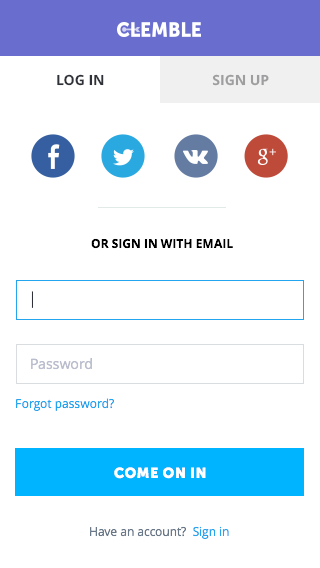
<style>
.page{position:relative;width:320px;height:568px;background:#ffffff}
.page>*{position:absolute;margin:0}
.t1{font:14px "OpenSans-Bold";color:#2f3139;text-transform:uppercase}
.t2{font:14px "OpenSans-Bold";color:#9e9ea0;text-transform:uppercase}
.t3{font:12px "OpenSans-Bold";color:#000000;text-transform:uppercase}
.t4{font:16px "OpenSans-Light";color:#2f3139}
.t5{font:14px "OpenSans";color:#b9bdcd}
.t6{font:12px "OpenSans";color:#24a6ef}
.t7{font:14px "MuseoSans-900";letter-spacing:0.05em;color:#ffffff;text-transform:uppercase}
.t8{font:12px "OpenSans";color:#697889}
</style>
<div class="page">
<p class="t1" style="left:57px;top:74px;width:47px;height:12px">Log in</p>
<p class="t2" style="left:212px;top:74px;width:57px;height:12px">Sign up</p>
<p class="t3" style="left:91px;top:238px;width:142px;height:11px">OR sign in with email</p>
<p class="t4" style="left:31px;top:291px;width:2px;height:17px">|</p>
<p class="t5" style="left:31px;top:358px;width:61px;height:12px">Password</p>
<p class="t6" style="left:16px;top:398px;width:98px;height:13px">Forgot password?</p>
<p class="t7" style="left:114px;top:467px;width:92px;height:12px">Come on in</p>
<p class="t8" style="left:90px;top:526px;width:139px;height:13px">Have an account?  <span class="t6">Sign in</span></p>
</div>
